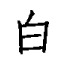
<style>
.page{position:relative;width:63px;height:63px;background:#ffffff}
.page>*{position:absolute;margin:0}
.t1{font:48px "·ÂËÎ-Regular";letter-spacing:0.025em;color:#000000;font-weight:bold}
</style>
<div class="page">
<p class="t1" style="left:17px;top:10px;width:32px;height:45px">白</p>
</div>
